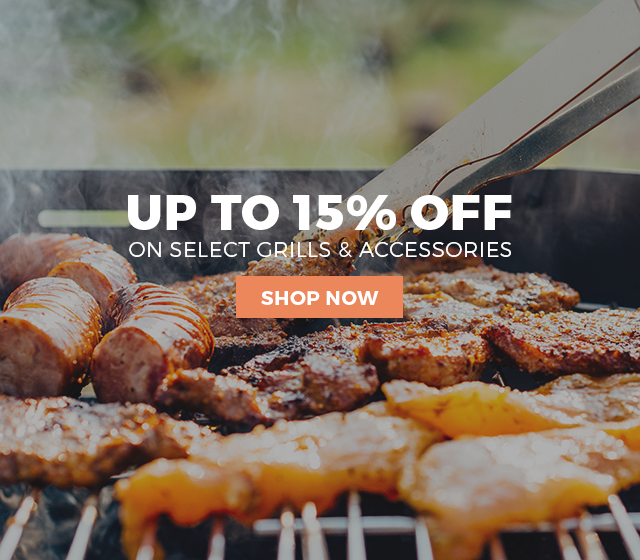
<style>
.page{position:relative;width:640px;height:560px}
.page>*{position:absolute;margin:0}
.t1{font:48.9px "Montserrat-ExtraBold";letter-spacing:0.025em;color:#ffffff}
.t2{font:21.2px "Montserrat-Light";letter-spacing:0.025em;color:#ffffff}
.t3{font:19.8px "Montserrat-Bold";letter-spacing:0.025em;color:#ffffff}
</style>
<div class="page">
<p class="t1" style="left:128px;top:195px;width:384px;height:35px">UP TO 15% OFF</p>
<p class="t2" style="left:129px;top:242px;width:382px;height:16px">ON SELECT GRILLS &amp; ACCESSORIES</p>
<p class="t3" style="left:261px;top:291px;width:118px;height:14px">SHOP NOW</p>
</div>
